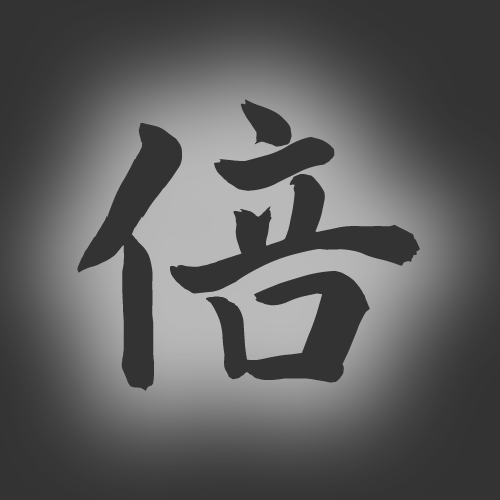
<style>
.page{position:relative;width:500px;height:500px}
.page>*{position:absolute;margin:0}
.t1{font:377.6px "nagayama_kai";color:#333333}
</style>
<div class="page">
<p class="t1" style="left:77px;top:99px;width:343px;height:293px">倍</p>
</div>
